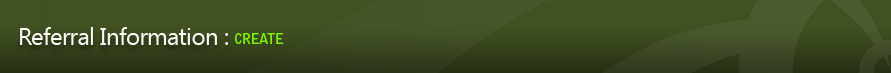
<style>
.page{position:relative;width:891px;height:73px;background:#415122}
.page>*{position:absolute;margin:0}
.t1{font:24px "SegoeUI";letter-spacing:-0.025em;color:#faf7f5}
.t2{font:14px "BellGothicStd-Bold";letter-spacing:-0.05em;color:#7af40e}
</style>
<div class="page">
<p class="t1" style="left:20px;top:27px;width:208px;height:18px">Referral Information :</p>
<p class="t2" style="left:235px;top:33px;width:49px;height:11px">CREATE</p>
</div>
